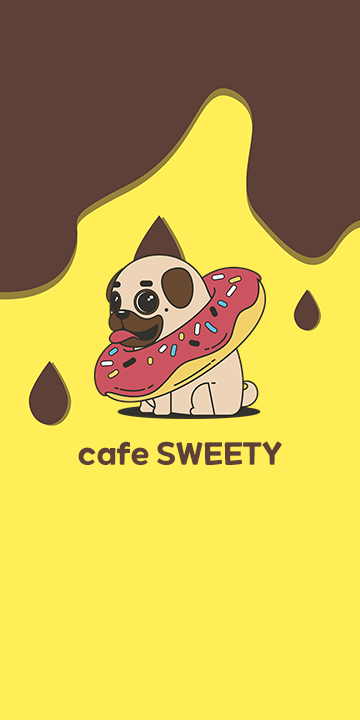
<style>
.page{position:relative;width:360px;height:720px;background:#ffee58}
.page>*{position:absolute;margin:0}
.t1{font:30px "ONEMobilePOPRegular";color:#5d4037}
</style>
<div class="page">
<p class="t1" style="left:78px;top:441px;width:204px;height:24px">cafe SWEETY</p>
</div>
